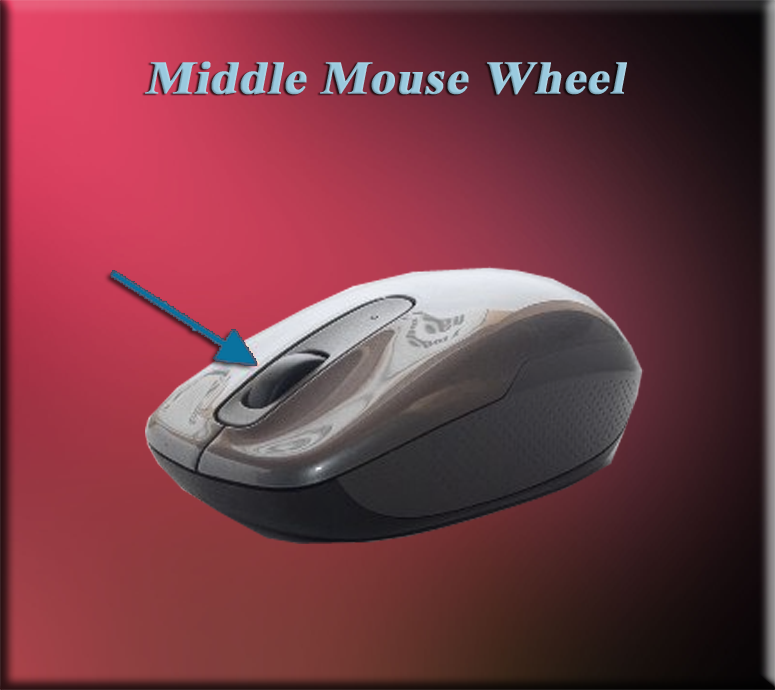
<style>
.page{position:relative;width:775px;height:690px}
.page>*{position:absolute;margin:0}
.t1{font:46.4px "TimesNewRomanPS-BoldMT";color:#9acadf;font-weight:bold;font-style:italic;scale:1.08 1}
</style>
<div class="page">
<p class="t1" style="left:145px;top:61px;width:482px;height:34px">Middle Mouse Wheel</p>
</div>
